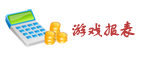
<style>
.page{position:relative;width:142px;height:58px;background:#ffffff}
.page>*{position:absolute;margin:0}
.t1{font:18px "FZSTK--GBK1-0";letter-spacing:-0.14em;color:#bd3a3a;font-weight:bold}
</style>
<div class="page">
<p class="t1" style="left:72px;top:21px;width:63px;height:17px">游戏报表</p>
</div>
